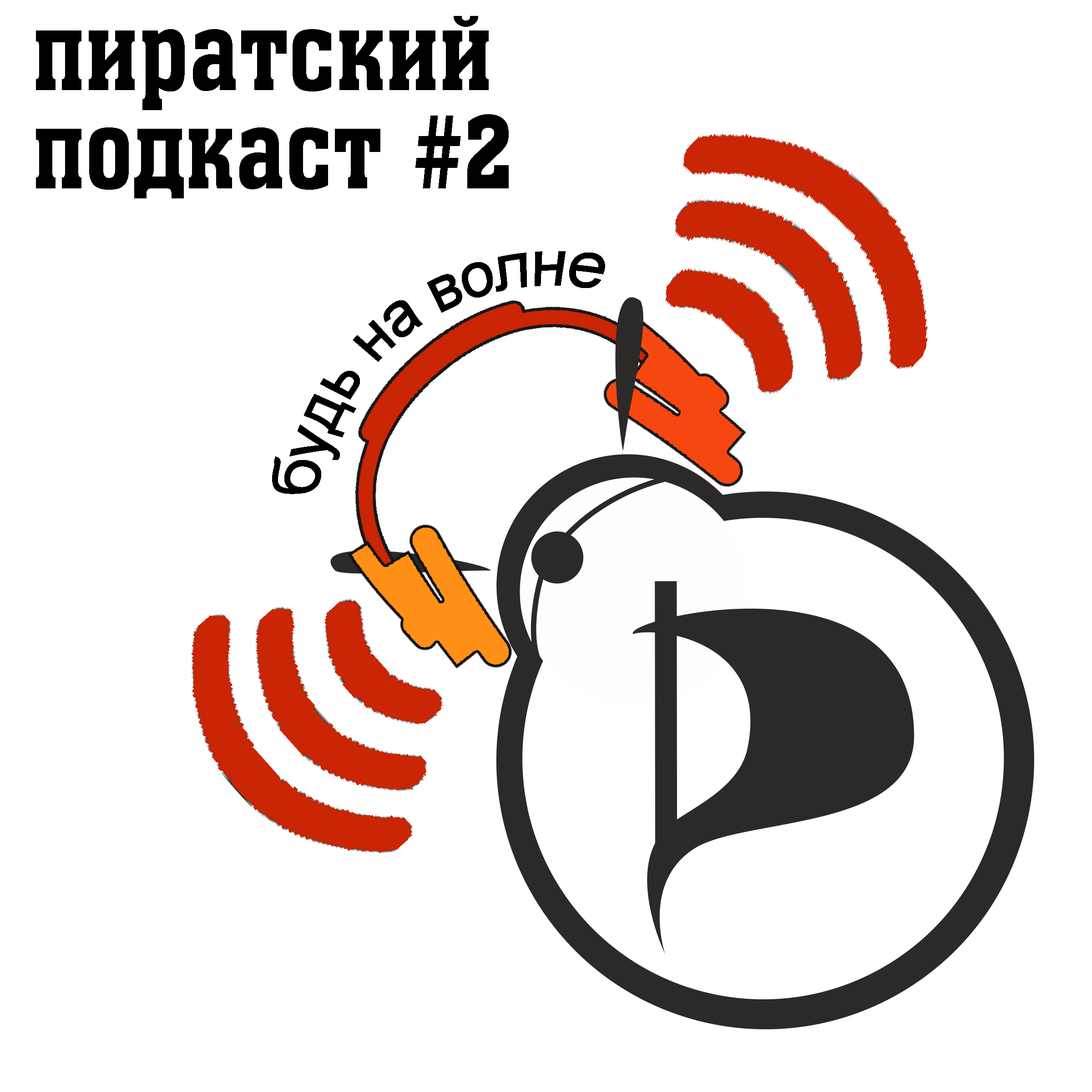
<style>
.page{position:relative;width:1092px;height:1092px;background:#ffffff}
.page>*{position:absolute;margin:0}
.t1{font:100.1px/8.2px "a_AssuanNr";color:#000000}
.t2{font:54.6px "ArialMT";color:#000000;scale:0.94 1}
</style>
<div class="page">
<p class="t1" style="left:36px;top:16px;width:473px;height:182px">пиратский <br><br><br><br><br><br><br><br><br><br><br><br>подкаст #2</p>
<p class="t2" style="left:272px;top:251px;width:333px;height:243px;rotate:-36deg">будь на волне</p>
</div>
